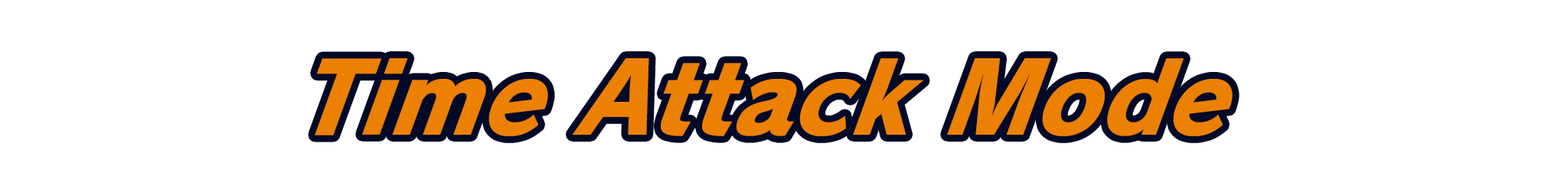
<style>
.page{position:relative;width:1568px;height:196px;background:#ffffff}
.page>*{position:absolute;margin:0}
.t1{font:104.1px "RodinPro-EB";letter-spacing:0.001em;color:#ec8002;scale:0.94 1}
</style>
<div class="page">
<p class="t1" style="left:315px;top:58px;width:918px;height:78px">Time Attack Mode</p>
</div>
